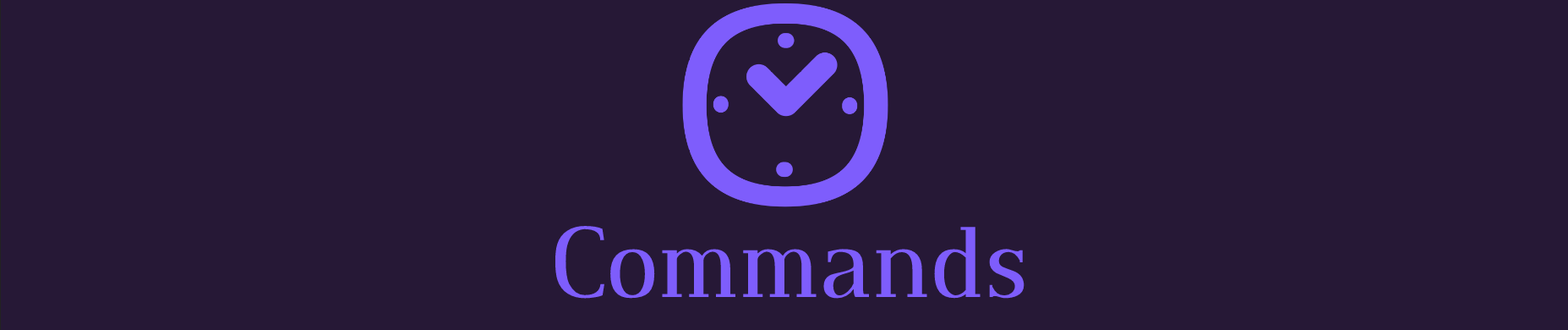
<style>
.page{position:relative;width:1568px;height:330px;background:#261836}
.page>*{position:absolute;margin:0}
.t1{font:98.1px "DustismoRoman";color:#7e5dfc}
</style>
<div class="page">
<p class="t1" style="left:555px;top:226px;width:469px;height:72px">Commands</p>
</div>
